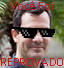
<style>
.page{position:relative;width:64px;height:68px}
.page>*{position:absolute;margin:0}
.t1{font:12.4px "Calibri";color:#c91818}
</style>
<div class="page">
<p class="t1" style="left:10px;top:1px;width:43px;height:9px">Você Foi</p>
<p class="t1" style="left:1px;top:58px;width:62px;height:8px">REPROVADO</p>
</div>
